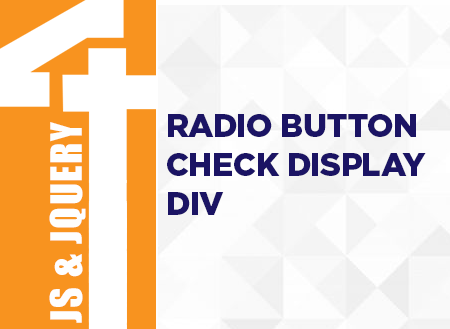
<style>
.page{position:relative;width:450px;height:329px}
.page>*{position:absolute;margin:0}
.t1{font:40px "Impact";letter-spacing:0.042em;color:#fefefe}
.t2{font:32.4px "Gotham-Black";letter-spacing:-0.02em;color:#1b1464;text-transform:uppercase}
</style>
<div class="page">
<p class="t1" style="left:49px;top:122px;width:37px;height:201px;rotate:-90deg">JS &amp; JQUERY</p>
<p class="t2" style="left:167px;top:114px;width:259px;height:101px">Radio Button<br>Check Display<br>div</p>
</div>
